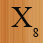
<style>
.page{position:relative;width:43px;height:43px}
.page>*{position:absolute;margin:0}
.t1{font:30px "TimesNewRomanPSMT";color:#0c0c0b}
.t2{font:12px "TimesNewRomanPSMT";color:#0c0c0b}
</style>
<div class="page">
<p class="t1" style="left:11px;top:7px;width:22px;height:20px">X</p>
<p class="t2" style="left:33px;top:28px;width:6px;height:9px">8</p>
</div>
